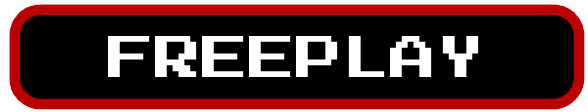
<style>
.page{position:relative;width:588px;height:112px;background:#000000}
.page>*{position:absolute;margin:0}
.t1{font:47px "Super-Mario-Bros.-NES";color:#ffffff}
</style>
<div class="page">
<p class="t1" style="left:108px;top:35px;width:371px;height:42px">freeplay</p>
</div>
